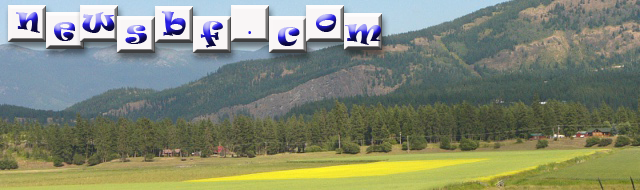
<style>
.page{position:relative;width:640px;height:190px}
.page>*{position:absolute;margin:0}
.t1{font:30px "Ravie"}
.t2{font:30px "PerpetuaTitlingMT-Light";color:#271de7}
</style>
<div class="page">
<p class="t1" style="left:16px;top:12px;width:24px;height:21px">n</p>
<p class="t1" style="left:82px;top:12px;width:33px;height:21px">w</p>
<p class="t1" style="left:161px;top:11px;width:25px;height:25px">b</p>
<p class="t1" style="left:316px;top:14px;width:21px;height:18px">o</p>
<p class="t1" style="left:54px;top:22px;width:21px;height:19px">e</p>
<p class="t1" style="left:125px;top:25px;width:22px;height:19px">s</p>
<p class="t1" style="left:200px;top:21px;width:23px;height:27px">f</p>
<p class="t1" style="left:278px;top:27px;width:22px;height:19px">c</p>
<p class="t1" style="left:344px;top:24px;width:38px;height:21px">m</p>
<p class="t2" style="left:248px;top:31px;width:3px;height:3px">.</p>
</div>
